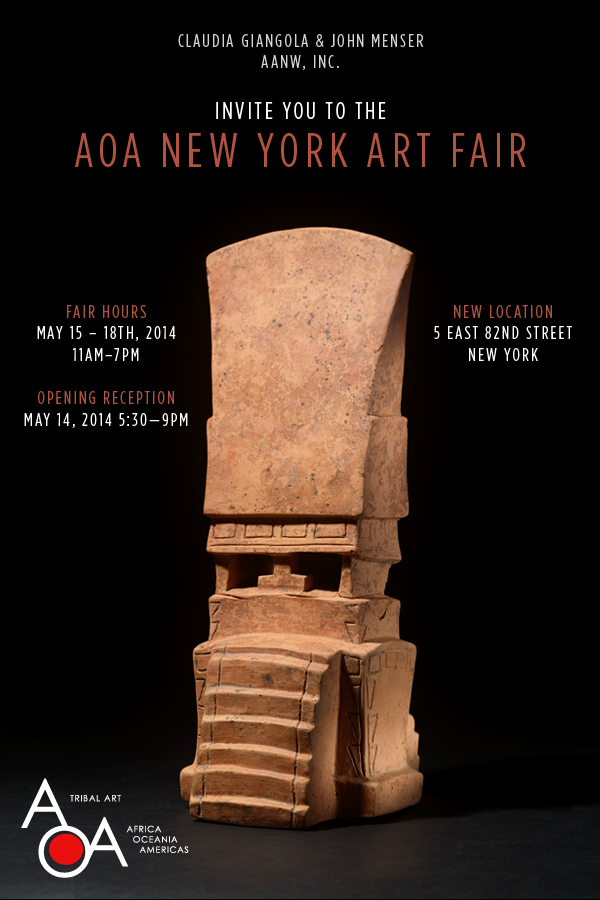
<style>
.page{position:relative;width:600px;height:900px;background:#000000}
.page>*{position:absolute;margin:0}
.t1{font:18px "GothamHTF-BookCondensed";letter-spacing:0.12em;color:#d5d5d5;text-transform:uppercase}
.t2{font:24px "GothamHTF-BookCondensed";letter-spacing:0.12em;color:#ffffff;text-transform:uppercase}
.t3{font:48px/48px "GothamHTF-BookCondensed";letter-spacing:0.12em;color:#b15340;text-transform:uppercase}
.t4{font:18px "GothamHTF-BookCondensed";letter-spacing:0.12em;color:#ffffff;text-transform:uppercase}
.t5{font:18px "GothamHTF-BookCondensed";letter-spacing:0.12em;color:#b15340;text-transform:uppercase}
</style>
<div class="page">
<p class="t1" style="left:75px;top:34px;width:451px;height:133px;text-align:center">Claudia Giangola &amp; John Menser<br>AANW, INC.<br><br><span class="t2">Invite you to the<br></span><span class="t3">AOA New York Art Fair</span></p>
<p class="t4" style="left:24px;top:305px;width:164px;height:123px;text-align:center"><span class="t5">FAIR HOURS<br></span>May 15 – 18th, 2014<br>11AM–7PM<br><br><span class="t5">Opening Reception<br></span>May 14, 2014 5:30—9PM</p>
<p class="t4" style="left:434px;top:305px;width:138px;height:56px;text-align:center"><span class="t5">NEW LOCATION<br></span>5 East 82nd Street <br>New York</p>
</div>
